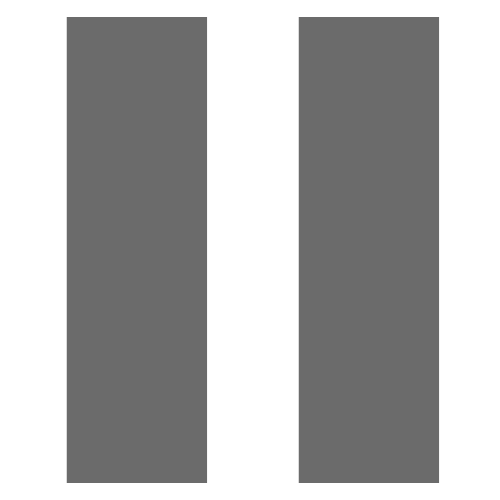
<style>
.page{position:relative;width:500px;height:500px;background:#6b6b6b}
.page>*{position:absolute;margin:0}
.t1{font:159.7px "SegoeUIBlack";color:#6b6b6b}
</style>
<div class="page">
<p class="t1" style="left:66px;top:17px;width:374px;height:466px">II</p>
</div>
